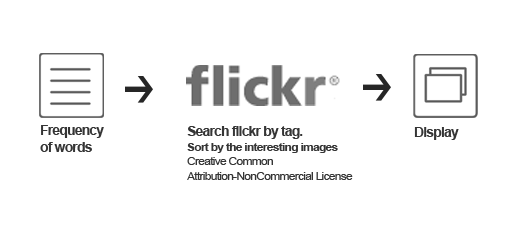
<style>
.page{position:relative;width:523px;height:226px;background:#ffffff}
.page>*{position:absolute;margin:0}
.t1{font:13px "Arial-BoldMT";letter-spacing:-0.06em;color:#353535;scale:1.08 1}
.t2{font:11.2px "ArialMT";letter-spacing:-0.06em;color:#353535;scale:1.08 1}
.t3{font:11.2px "Arial-BoldMT";letter-spacing:-0.06em;color:#353535;scale:1.08 1}
</style>
<div class="page">
<p class="t1" style="left:40px;top:125px;width:64px;height:27px">Frequency<br>of words</p>
<p class="t2" style="left:187px;top:126px;width:166px;height:54px"><span class="t1">Search flickr by tag.</span><span class="t3"> <br>Sort by the interesting images <br></span>Creative Common <br>Attribution-NonCommercial License</p>
<p class="t1" style="left:414px;top:127px;width:45px;height:13px">Display</p>
</div>
